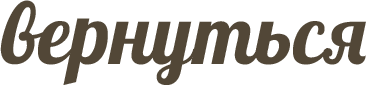
<style>
.page{position:relative;width:366px;height:85px;background:#ffffff}
.page>*{position:absolute;margin:0}
.t1{font:84.5px "Lobster";color:#524838}
</style>
<div class="page">
<p class="t1" style="left:0px;top:0px;width:366px;height:85px">вернуться</p>
</div>
